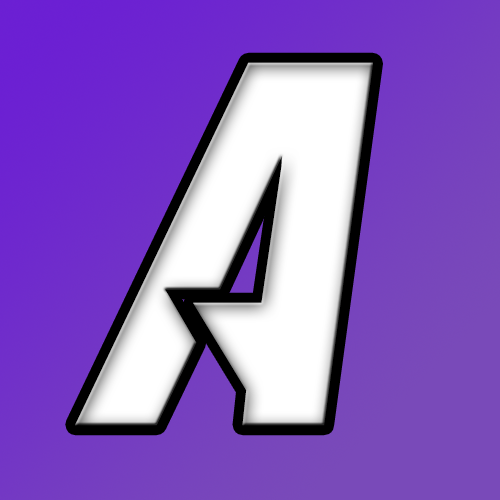
<style>
.page{position:relative;width:500px;height:500px}
.page>*{position:absolute;margin:0}
.t1{font:411px "RaiderCrusader";color:#ffffff}
</style>
<div class="page">
<p class="t1" style="left:75px;top:62px;width:298px;height:364px">A</p>
</div>
